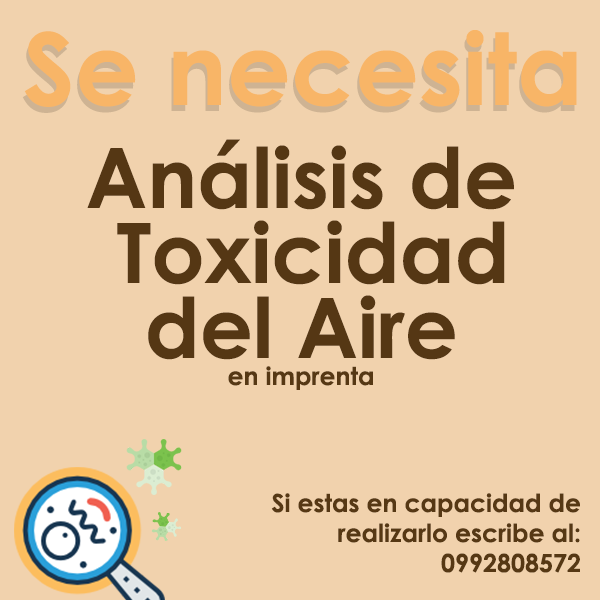
<style>
.page{position:relative;width:600px;height:600px;background:#f1d2ad}
.page>*{position:absolute;margin:0}
.t1{font:100px "CenturyGothic-Bold";color:#f8b567}
.t2{font:100px "CenturyGothic-Bold"}
.t3{font:83.3px/75px "CenturyGothic-Bold";color:#563814}
.t4{font:25px "CenturyGothic-Bold";color:#563814}
.t5{font:12px "CenturyGothic-Bold";color:#563814}
</style>
<div class="page">
<p class="t1" style="left:24px;top:30px;width:553px;height:77px">Se necesita</p>
<p class="t2" style="left:22px;top:36px;width:553px;height:77px">Se necesita</p>
<p class="t3" style="left:87px;top:139px;width:427px;height:221px;text-align:center">Análisis de <br>Toxicidad<br>del Aire</p>
<p class="t4" style="left:228px;top:366px;width:145px;height:24px">en imprenta</p>
<p class="t5" style="left:271px;top:493px;width:309px;height:80px;text-align:right">Si estas en capacidad de<br>realizarlo escribe al:<br>0992808572</p>
</div>
